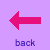
<style>
.page{position:relative;width:50px;height:50px;background:#d59aff}
.page>*{position:absolute;margin:0}
.t1{font:10px "FranklinGothic-Book";color:#2100a6}
</style>
<div class="page">
<p class="t1" style="left:15px;top:39px;width:20px;height:7px">back</p>
</div>
